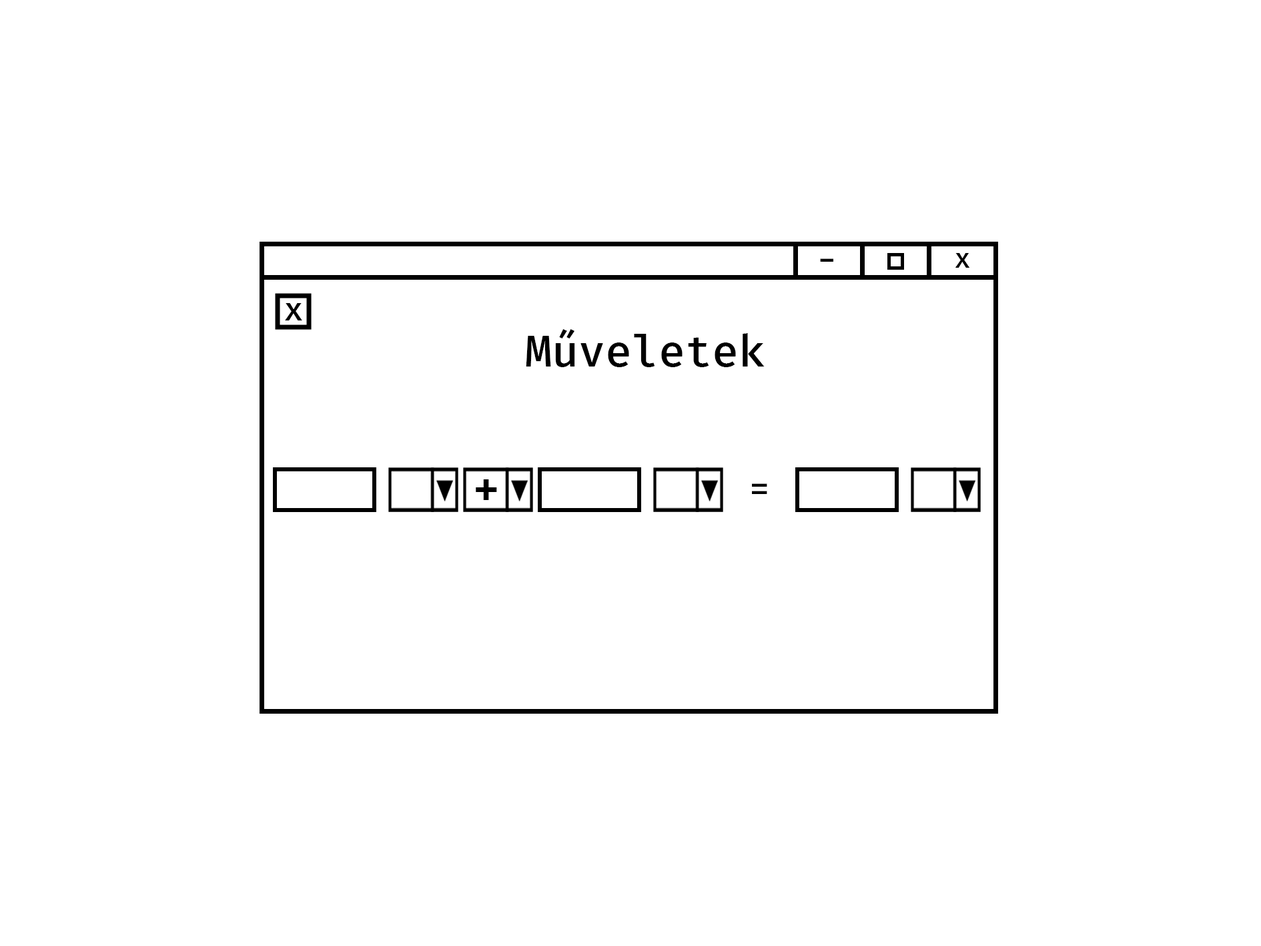
<style>
.page{position:relative;width:1261px;height:946px;background:#ffffff}
.page>*{position:absolute;margin:0}
.t1{font:27.8px "FiraMono-Medium";color:#000000}
.t2{font:36.1px "FiraMono-Medium";color:#000000}
.t3{font:33.4px "FiraMono-Medium";color:#000000}
.t4{font:44.5px "FiraMono-Medium";color:#000000}
.t5{font:52.8px "FiraMono-Medium";color:#000000}
</style>
<div class="page">
<p class="t1" style="left:955px;top:253px;width:15px;height:15px">x</p>
<p class="t2" style="left:820px;top:258px;width:13px;height:4px">-</p>
<p class="t3" style="left:285px;top:303px;width:17px;height:17px">x</p>
<p class="t4" style="left:526px;top:329px;width:239px;height:38px">Műveletek</p>
<p class="t5" style="left:476px;top:479px;width:21px;height:21px">+</p>
<p class="t2" style="left:752px;top:483px;width:15px;height:11px">=</p>
</div>
